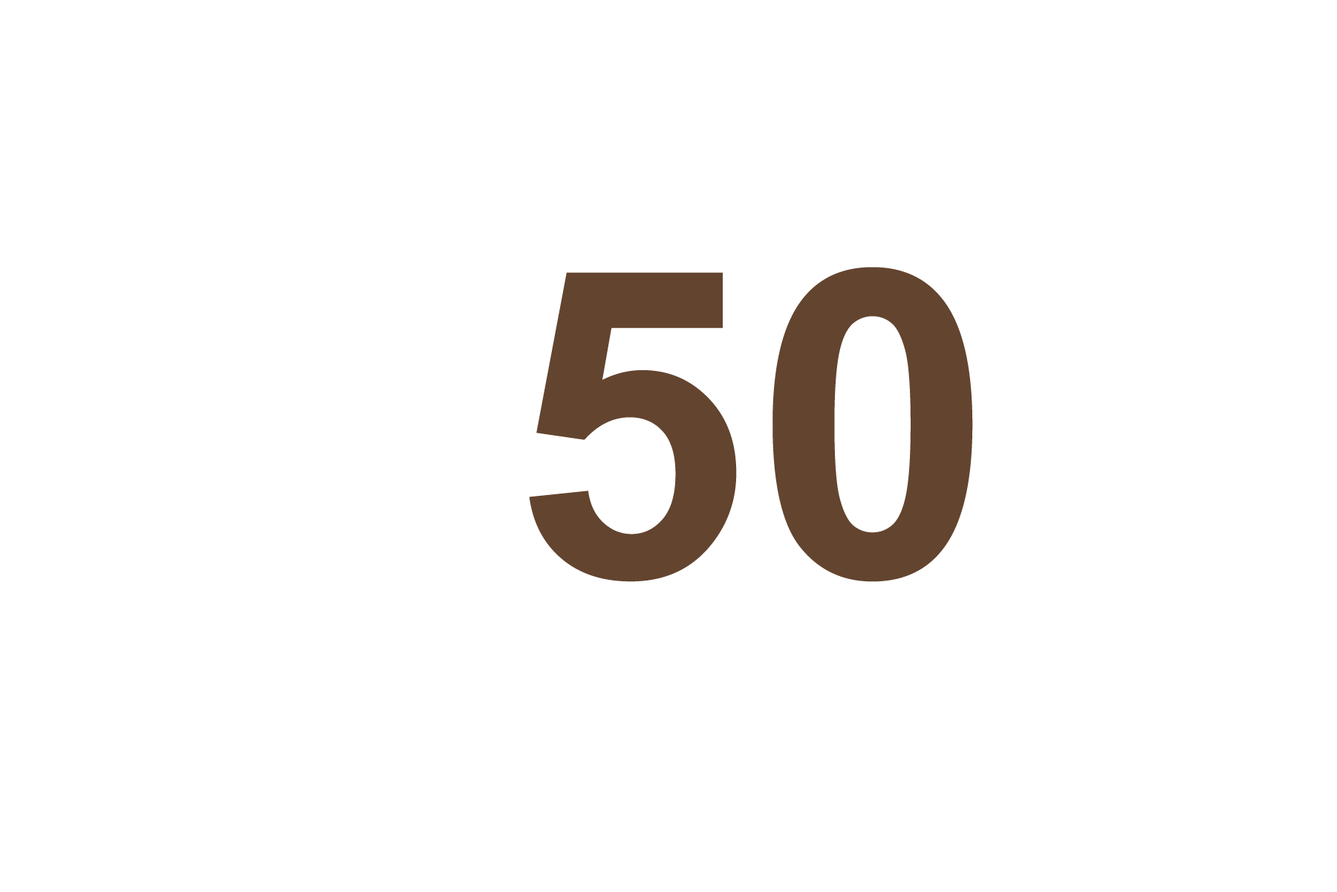
<style>
.page{position:relative;width:1337px;height:892px;background:#ffffff}
.page>*{position:absolute;margin:0}
.t1{font:429.6px "Arial-BoldMT";color:#63442f}
</style>
<div class="page">
<p class="t1" style="left:529px;top:267px;width:444px;height:315px">50</p>
</div>
